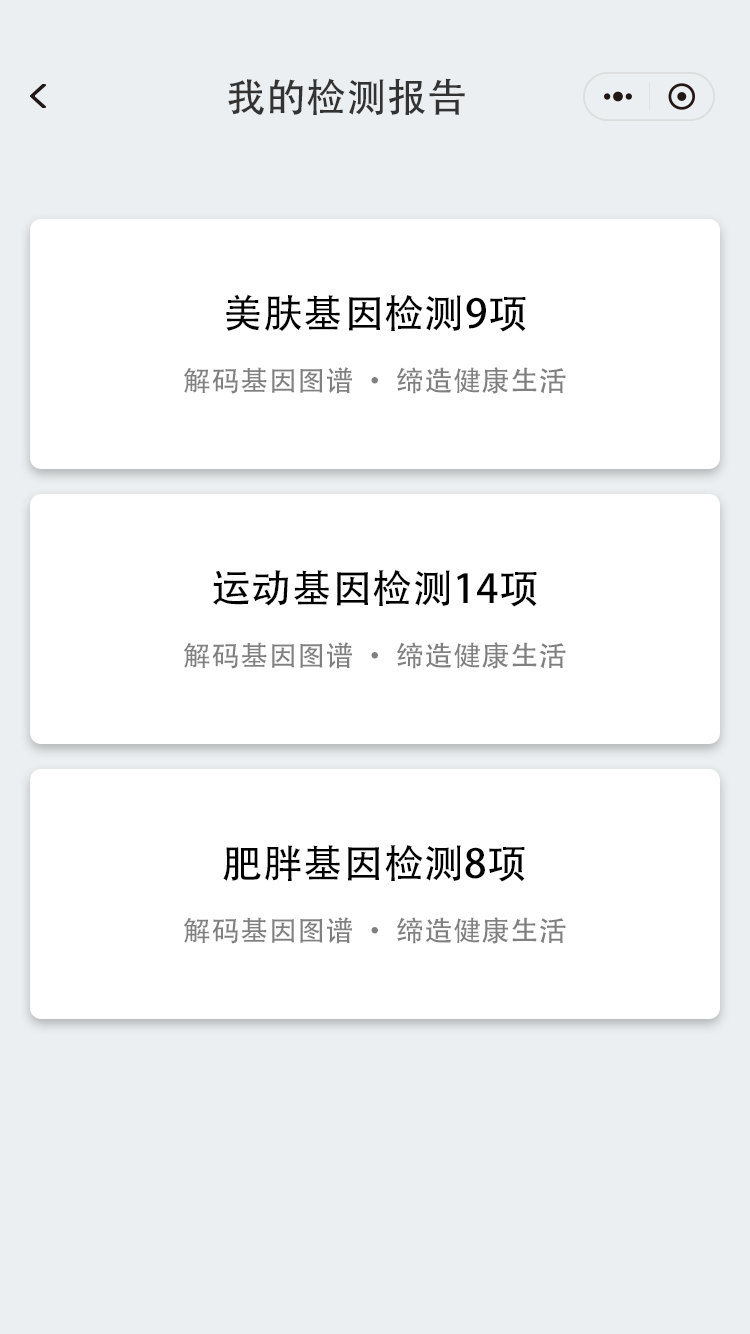
<style>
.page{position:relative;width:750px;height:1334px;background:#ffffff}
.page>*{position:absolute;margin:0}
.t1{font:39.7px "AdobeHeitiStd-Regular";letter-spacing:0.01em;color:#333333}
.t2{font:39.6px "AdobeHeitiStd-Regular";letter-spacing:0.01em;color:#000000}
.t3{font:28px "AdobeHeitiStd-Regular";letter-spacing:0.01em;color:#808080}
</style>
<div class="page">
<p class="t1" style="left:228px;top:78px;width:237px;height:37px">我的检测报告</p>
<p class="t2" style="left:226px;top:294px;width:300px;height:38px">美肤基因检测9项</p>
<p class="t3" style="left:183px;top:367px;width:383px;height:27px">解码基因图谱 · 缔造健康生活</p>
<p class="t2" style="left:213px;top:570px;width:324px;height:37px">运动基因检测14项</p>
<p class="t3" style="left:183px;top:642px;width:383px;height:27px">解码基因图谱 · 缔造健康生活</p>
<p class="t2" style="left:223px;top:845px;width:302px;height:37px">肥胖基因检测8项</p>
<p class="t3" style="left:183px;top:917px;width:383px;height:27px">解码基因图谱 · 缔造健康生活</p>
</div>
